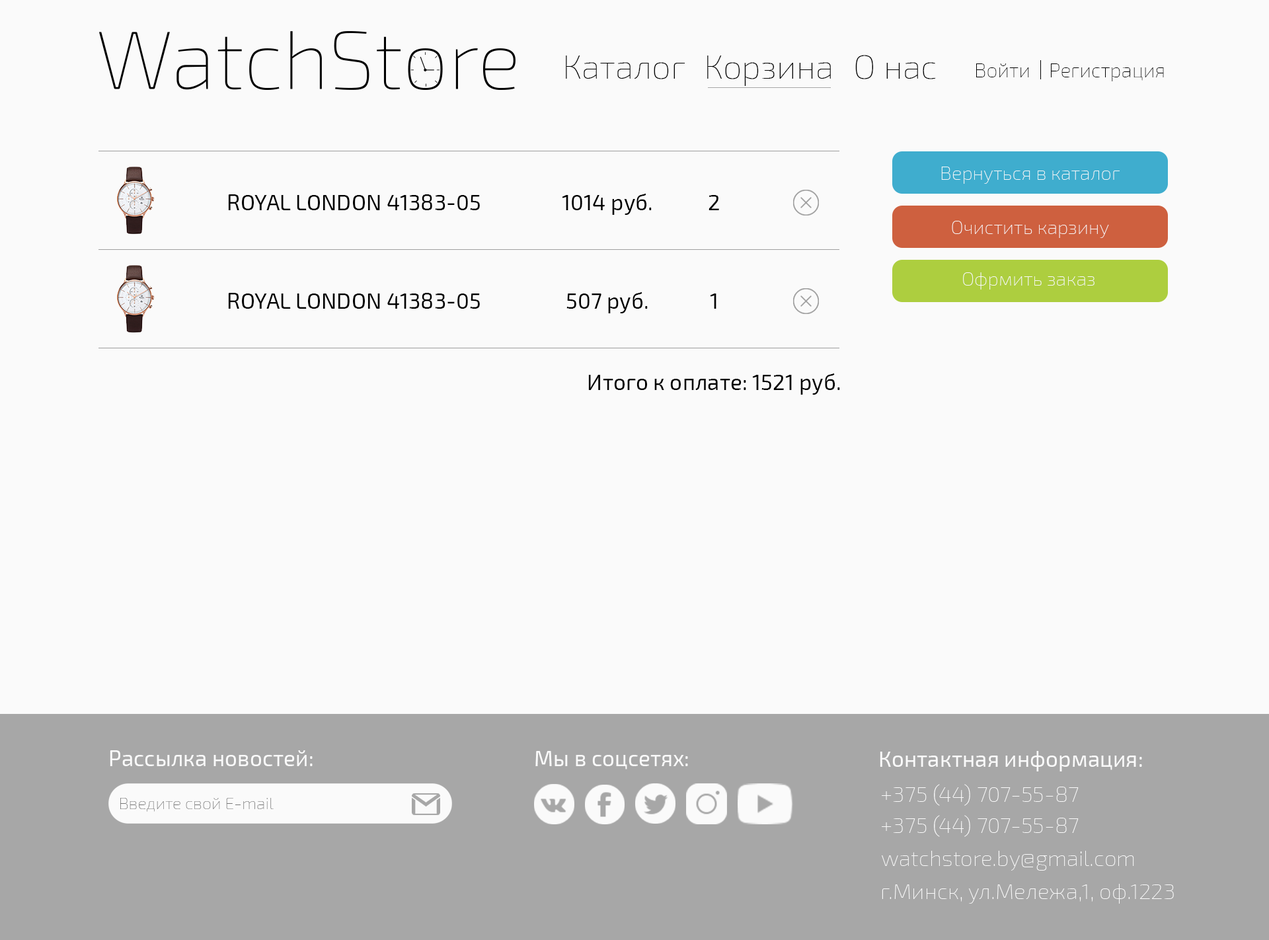
<style>
.page{position:relative;width:1269px;height:940px;background:#fafafa}
.page>*{position:absolute;margin:0}
.t1{font:33.9px "Exo2-Thin";color:#000000}
.t2{font:20px "Exo2-Thin";color:#000000}
.t3{font:19.3px "Exo2-Thin";color:#fafafa}
.t4{font:22px "Exo2-Regular";color:#000000}
.t5{font:22px "Exo2-Regular";color:#fafafa}
.t6{font:22px "Exo2-Thin";color:#fafafa}
.t7{font:16.6px "Exo2-Thin";color:#767676}
</style>
<div class="page">
<p class="t1" style="left:566px;top:56px;width:119px;height:23px">Каталог</p>
<p class="t1" style="left:707px;top:56px;width:124px;height:30px">Корзина</p>
<p class="t1" style="left:855px;top:55px;width:81px;height:24px">О нас</p>
<p class="t2" style="left:976px;top:63px;width:53px;height:14px">Войти</p>
<p class="t2" style="left:1051px;top:63px;width:113px;height:18px">Регистрация</p>
<p class="t3" style="left:941px;top:167px;width:179px;height:17px">Вернуться в каталог</p>
<p class="t4" style="left:228px;top:194px;width:252px;height:16px">ROYAL LONDON 41383-05</p>
<p class="t4" style="left:562px;top:193px;width:90px;height:22px">1014 руб.</p>
<p class="t4" style="left:708px;top:195px;width:11px;height:15px">2</p>
<p class="t3" style="left:952px;top:221px;width:157px;height:17px">Очистить карзину</p>
<p class="t3" style="left:963px;top:272px;width:131px;height:17px">Офрмить заказ</p>
<p class="t4" style="left:228px;top:293px;width:252px;height:16px">ROYAL LONDON 41383-05</p>
<p class="t4" style="left:566px;top:291px;width:82px;height:22px">507 руб.</p>
<p class="t4" style="left:710px;top:293px;width:6px;height:16px">1</p>
<p class="t4" style="left:588px;top:373px;width:252px;height:22px">Итого к оплате: 1521 руб.</p>
<p class="t5" style="left:110px;top:750px;width:203px;height:16px">Рассылка новостей:</p>
<p class="t5" style="left:535px;top:751px;width:153px;height:18px">Мы в соцсетях:</p>
<p class="t5" style="left:880px;top:751px;width:262px;height:20px">Контактная информация:</p>
<p class="t6" style="left:882px;top:784px;width:197px;height:22px">+375 (44) 707-55-87</p>
<p class="t7" style="left:120px;top:798px;width:154px;height:14px">Введите свой E-mail</p>
<p class="t6" style="left:882px;top:815px;width:197px;height:22px">+375 (44) 707-55-87</p>
<p class="t6" style="left:882px;top:851px;width:252px;height:19px">watchstore.by@gmail.com</p>
<p class="t6" style="left:882px;top:884px;width:292px;height:19px">г.Минск, ул.Мележа,1, оф.1223</p>
</div>
